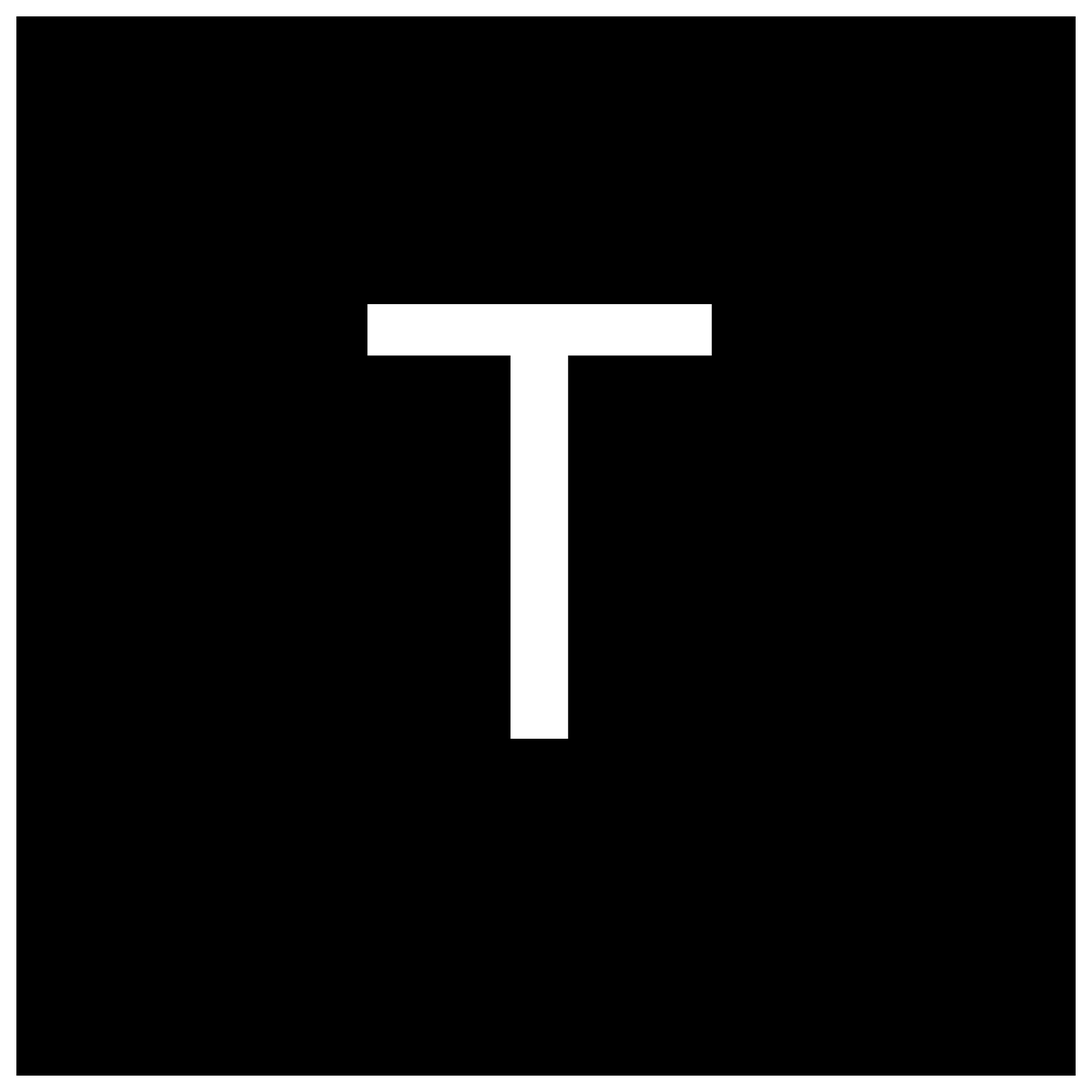
<style>
.page{position:relative;width:1092px;height:1092px;background:#000000}
.page>*{position:absolute;margin:0}
.t1{font:606.7px "ArialMT";color:#ffffff}
</style>
<div class="page">
<p class="t1" style="left:367px;top:304px;width:345px;height:435px">T</p>
</div>
